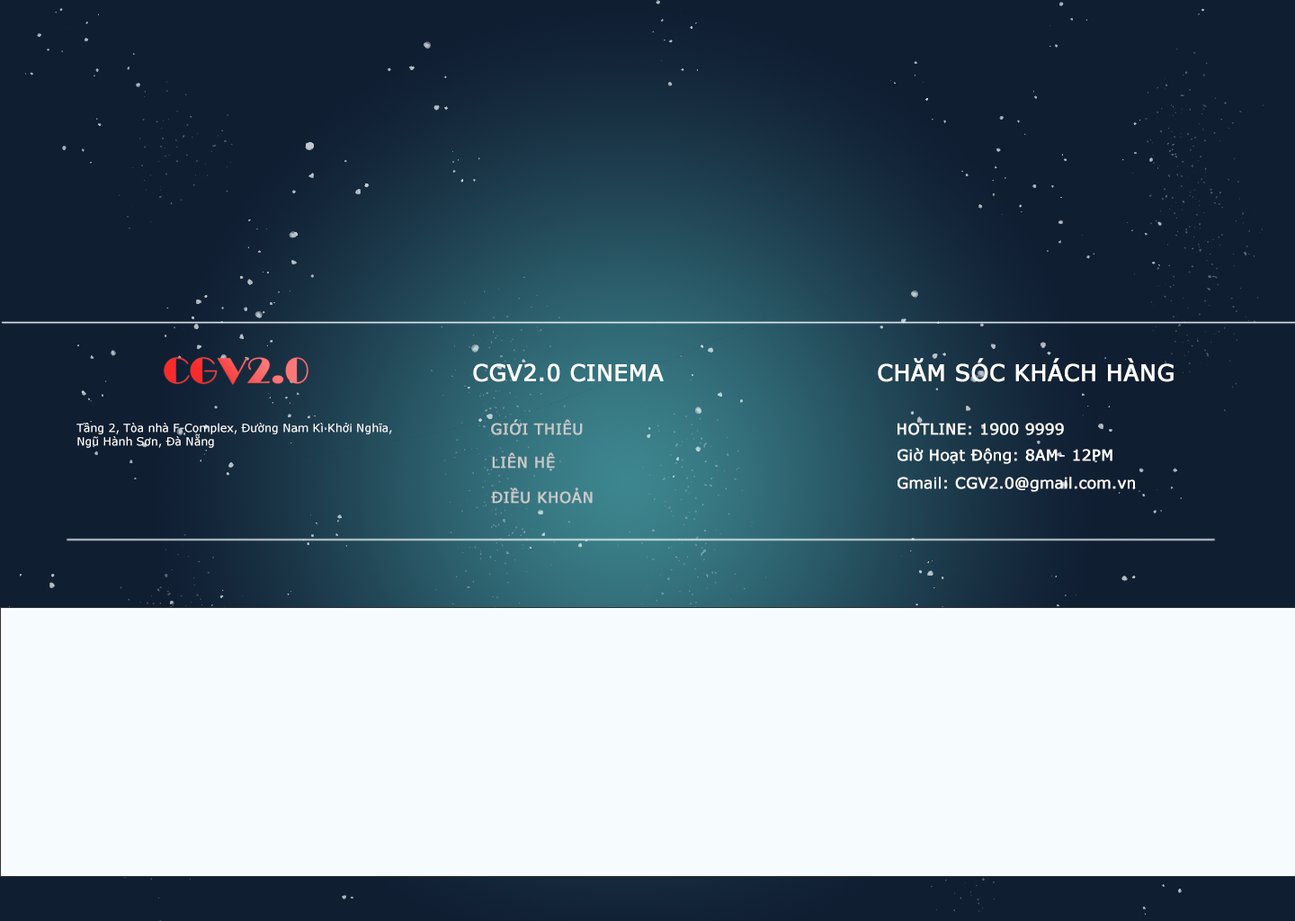
<style>
.page{position:relative;width:1295px;height:921px;background:#f6fcfd}
.page>*{position:absolute;margin:0}
.t1{font:22.5px "Verdana";color:#ffffff;font-weight:bold}
.t2{font:11.2px "Verdana";color:#ffffff}
.t3{font:15px "Verdana";color:#c8c8c8;font-weight:bold}
.t4{font:15px "Verdana";color:#fcf9f9;font-weight:bold}
.t5{font:15px "Verdana";color:#ffffff;font-weight:bold}
</style>
<div class="page">
<p class="t1" style="left:473px;top:363px;width:191px;height:19px">CGV2.0 CINEMA</p>
<p class="t1" style="left:878px;top:358px;width:296px;height:24px">CHĂM SÓC KHÁCH HÀNG</p>
<p class="t2" style="left:76px;top:423px;width:316px;height:25px">Tầng 2, Tòa nhà F-Complex, Đường Nam Kì Khởi Nghĩa,<br>Ngũ Hành Sơn, Đà Nẵng</p>
<p class="t3" style="left:491px;top:419px;width:92px;height:16px">GIỚI THIÊU</p>
<p class="t4" style="left:897px;top:423px;width:167px;height:12px">HOTLINE: 1900 9999</p>
<p class="t5" style="left:897px;top:448px;width:215px;height:16px">Giờ Hoạt Động: 8AM- 12PM</p>
<p class="t3" style="left:492px;top:452px;width:63px;height:19px">LIÊN HỆ</p>
<p class="t5" style="left:897px;top:477px;width:238px;height:15px">Gmail: CGV2.0@gmail.com.vn</p>
<p class="t3" style="left:491px;top:487px;width:102px;height:17px">ĐIỀU KHOẢN</p>
</div>
